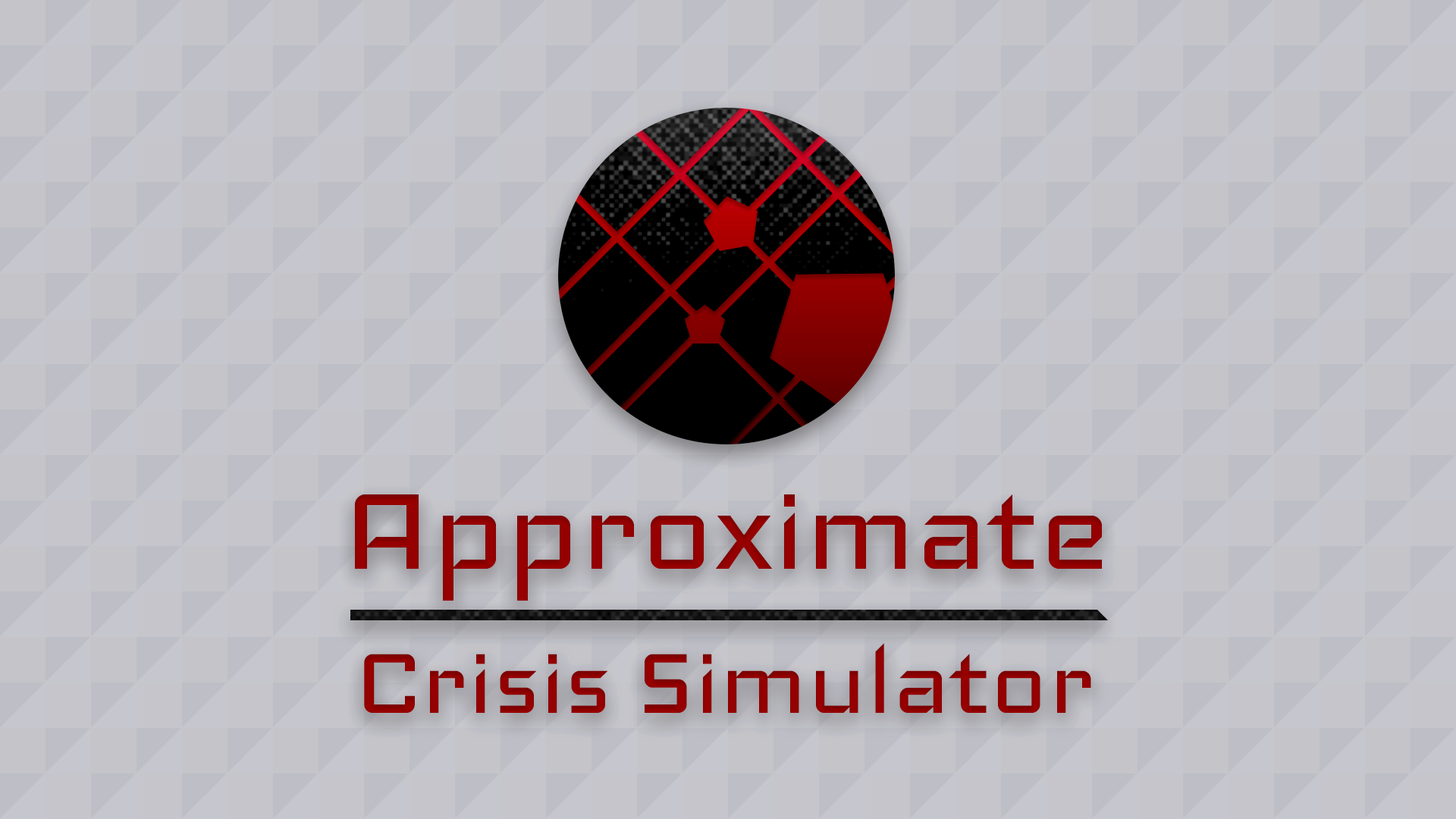
<style>
.page{position:relative;width:1456px;height:819px}
.page>*{position:absolute;margin:0}
.t1{font:119.8px "Iceland-Regular";color:#8b0000}
.t2{font:151.7px "Iceland-Regular";color:#8b0000}
</style>
<div class="page">
<p class="t1" style="left:354px;top:494px;width:748px;height:219px;text-align:center"><span class="t2">Approximate<br></span>Crisis Simulator</p>
</div>
